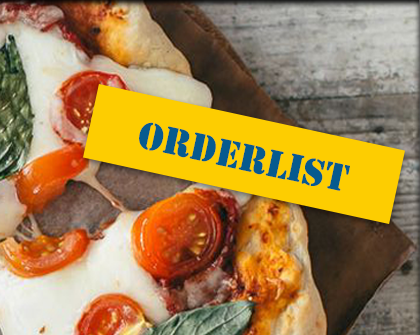
<style>
.page{position:relative;width:420px;height:335px}
.page>*{position:absolute;margin:0}
.t1{font:40px "Stencil";color:#065a8f}
</style>
<div class="page">
<p class="t1" style="left:139px;top:122px;width:211px;height:69px;rotate:12deg">OrderList</p>
</div>
